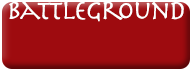
<style>
.page{position:relative;width:193px;height:71px;background:#9e0b0f}
.page>*{position:absolute;margin:0}
.t1{font:28px "Herculanum";letter-spacing:-0.075em;color:#ffffff}
</style>
<div class="page">
<p class="t1" style="left:9px;top:1px;width:175px;height:21px">BattleGround</p>
</div>
